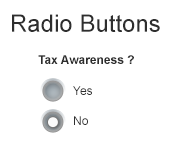
<style>
.page{position:relative;width:170px;height:159px;background:#ffffff}
.page>*{position:absolute;margin:0}
.t1{font:24px "ArialMT";color:#2e2e2e}
.t2{font:12px "Arial-BoldMT";color:#2e2e2e}
.t3{font:12px/30px "ArialMT";color:#2e2e2e}
</style>
<div class="page">
<p class="t1" style="left:12px;top:14px;width:148px;height:18px">Radio Buttons</p>
<p class="t2" style="left:38px;top:55px;width:96px;height:9px">Tax Awareness ?</p>
<p class="t3" style="left:73px;top:86px;width:19px;height:39px">Yes<br>No</p>
</div>
